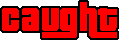
<style>
.page{position:relative;width:119px;height:40px;background:#ff0000}
.page>*{position:absolute;margin:0}
.t1{font:36px "PricedownBl-Regular";letter-spacing:0.03em;color:#ff0000}
</style>
<div class="page">
<p class="t1" style="left:2px;top:2px;width:115px;height:36px">caught</p>
</div>
